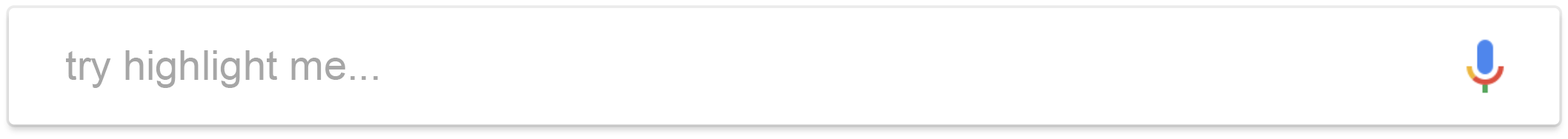
<style>
.page{position:relative;width:1568px;height:139px;background:#ffffff}
.page>*{position:absolute;margin:0}
.t1{font:41.5px "ArialMT";color:#a6a6a6}
</style>
<div class="page">
<p class="t1" style="left:66px;top:50px;width:312px;height:38px">try highlight me...</p>
</div>
